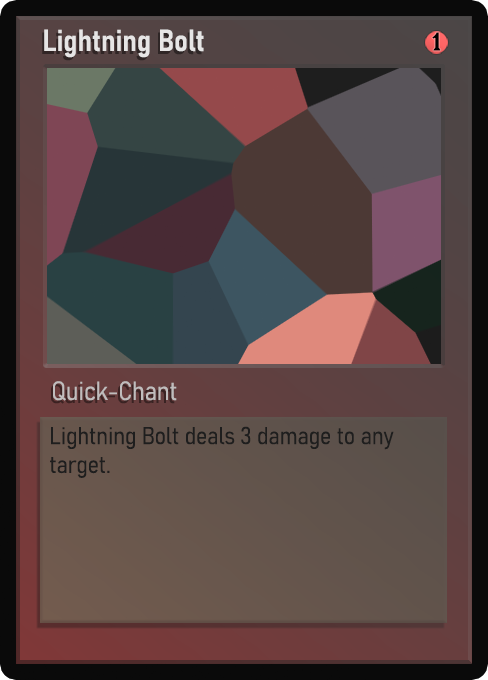
<style>
.page{position:relative;width:488px;height:680px}
.page>*{position:absolute;margin:0}
.t1{font:30px "Bahnschrift-SemiBoldSemiCondensed";color:#f2f2f2;font-weight:bold}
.t2{font:25px "WTRRoycroft";color:#000000;font-weight:bold;scale:1.09 1}
.t3{font:26px "Bahnschrift-LightSemiCondensed";color:#c8c8c8;font-weight:bold}
.t4{font:24px "Bahnschrift-LightSemiCondensed";color:#1e1e1e;font-weight:bold}
</style>
<div class="page">
<p class="t1" style="left:44px;top:29px;width:160px;height:29px;opacity:0.9">Lightning Bolt</p>
<p class="t2" style="left:432px;top:32px;width:9px;height:19px">1</p>
<p class="t3" style="left:53px;top:381px;width:124px;height:20px;opacity:0.9">Quick-Chant</p>
<p class="t4" style="left:50px;top:426px;width:344px;height:52px">Lightning Bolt deals 3 damage to any target.</p>
</div>
